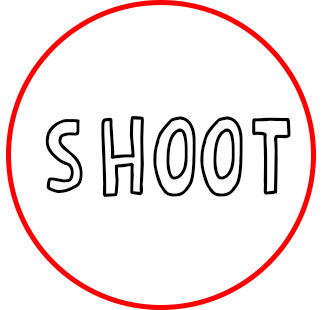
<style>
.page{position:relative;width:328px;height:310px;background:#ffffff}
.page>*{position:absolute;margin:0}
.t1{font:105.7px "FuenteManerismo";color:#000000}
</style>
<div class="page">
<p class="t1" style="left:45px;top:116px;width:246px;height:81px">shoot</p>
</div>
